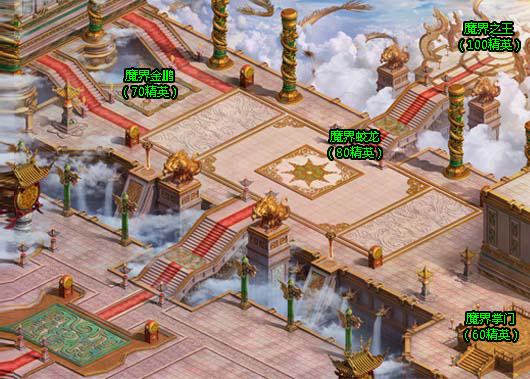
<style>
.page{position:relative;width:530px;height:379px}
.page>*{position:absolute;margin:0}
.t1{font:12px/16px "MicrosoftYaHei";color:#00ff00}
</style>
<div class="page">
<p class="t1" style="left:460px;top:22px;width:59px;height:29px;text-align:center">魔界之王<br>（100精英）</p>
<p class="t1" style="left:124px;top:69px;width:52px;height:29px;text-align:center">魔界金鹏<br>（70精英）</p>
<p class="t1" style="left:329px;top:130px;width:52px;height:29px;text-align:center">魔界蛟龙<br>（80精英）</p>
<p class="t1" style="left:465px;top:312px;width:52px;height:29px;text-align:center">魔界掌门<br>（60精英）</p>
</div>
